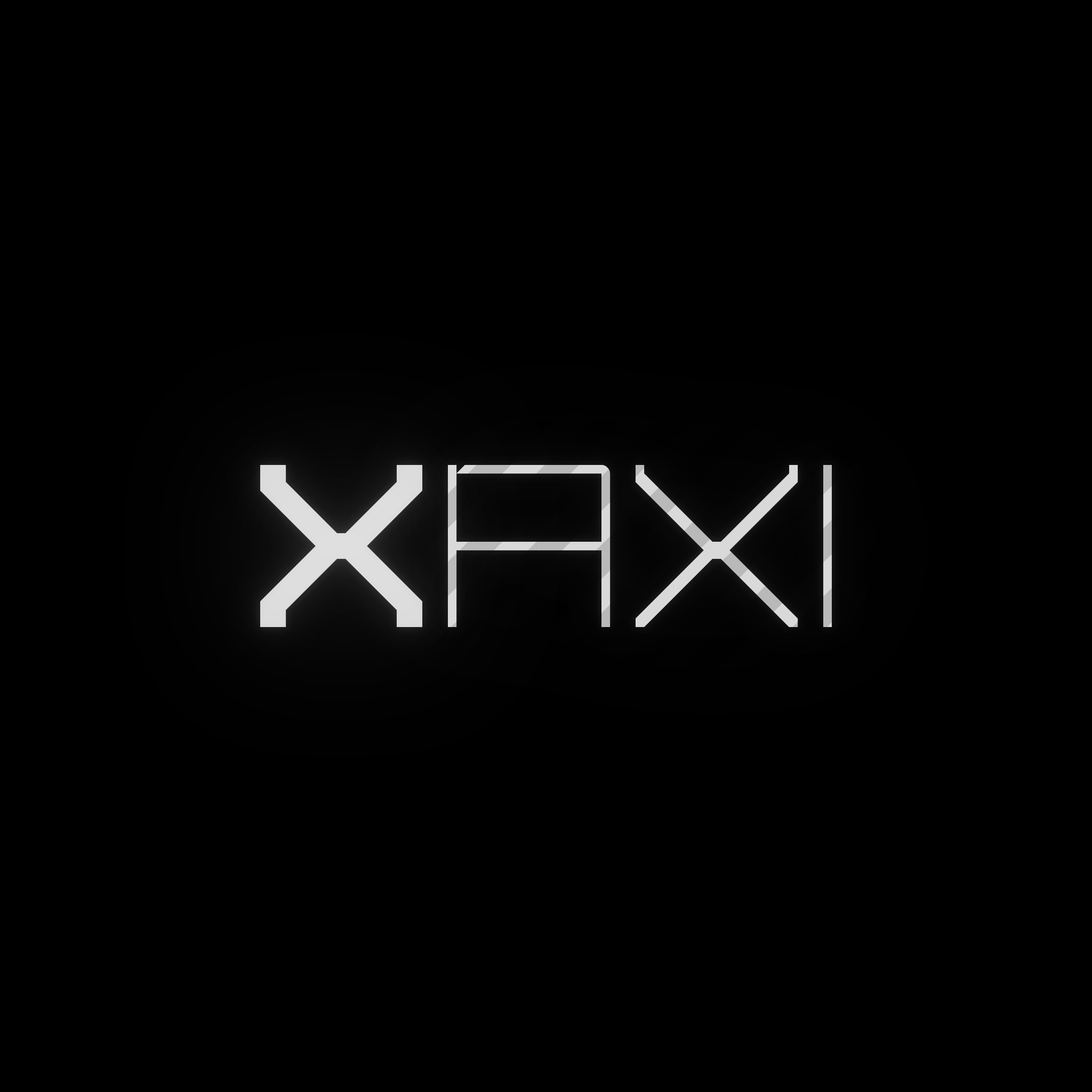
<style>
.page{position:relative;width:1092px;height:1092px;background:#000000}
.page>*{position:absolute;margin:0}
.t1{font:273px "Mirai-Seu";color:#dddddd}
.t2{font:273px "Mirai-Seu"}
</style>
<div class="page">
<p class="t1" style="left:260px;top:465px;width:162px;height:162px">X</p>
<p class="t2" style="left:448px;top:465px;width:384px;height:162px">axi</p>
</div>
